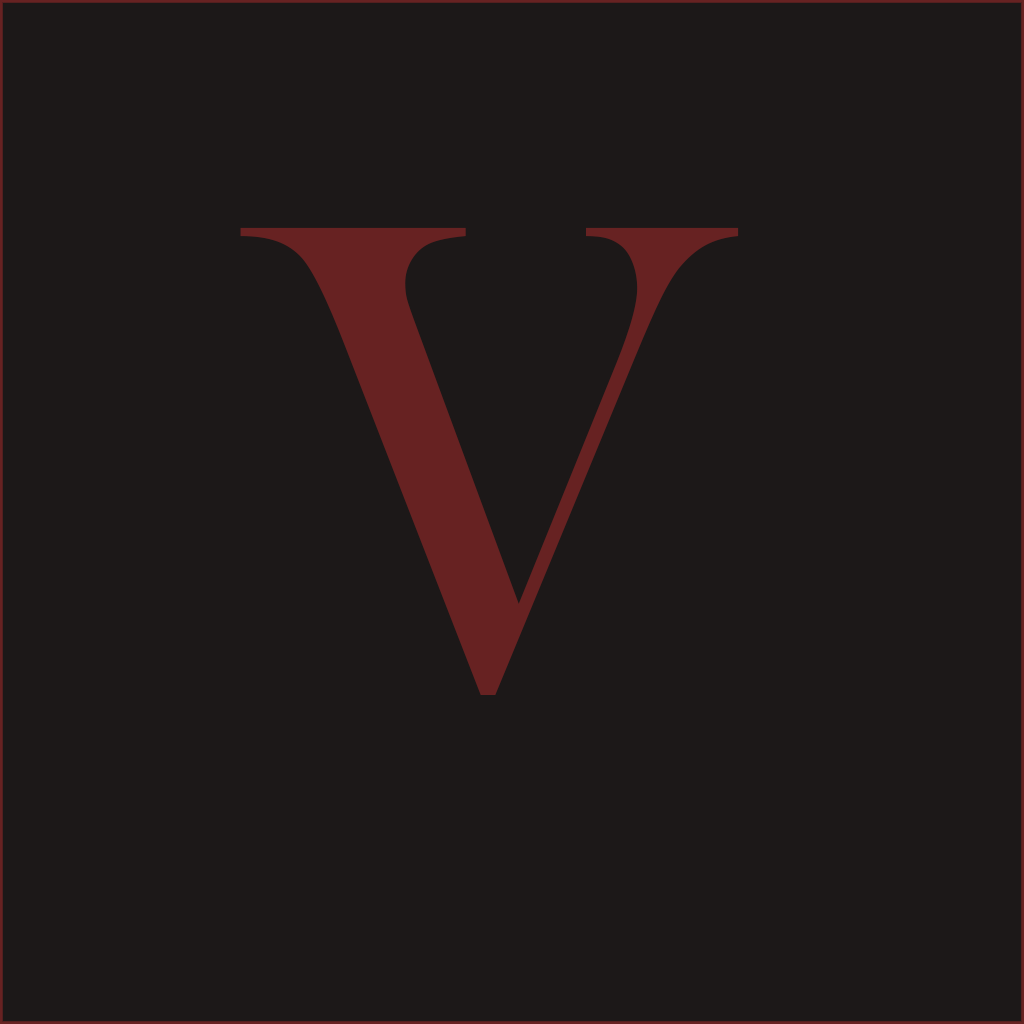
<style>
.page{position:relative;width:1024px;height:1024px;background:#1c1818}
.page>*{position:absolute;margin:0}
.t1{font:700px "BaskOldFace";color:#672222}
</style>
<div class="page">
<p class="t1" style="left:240px;top:227px;width:499px;height:468px">V</p>
</div>
